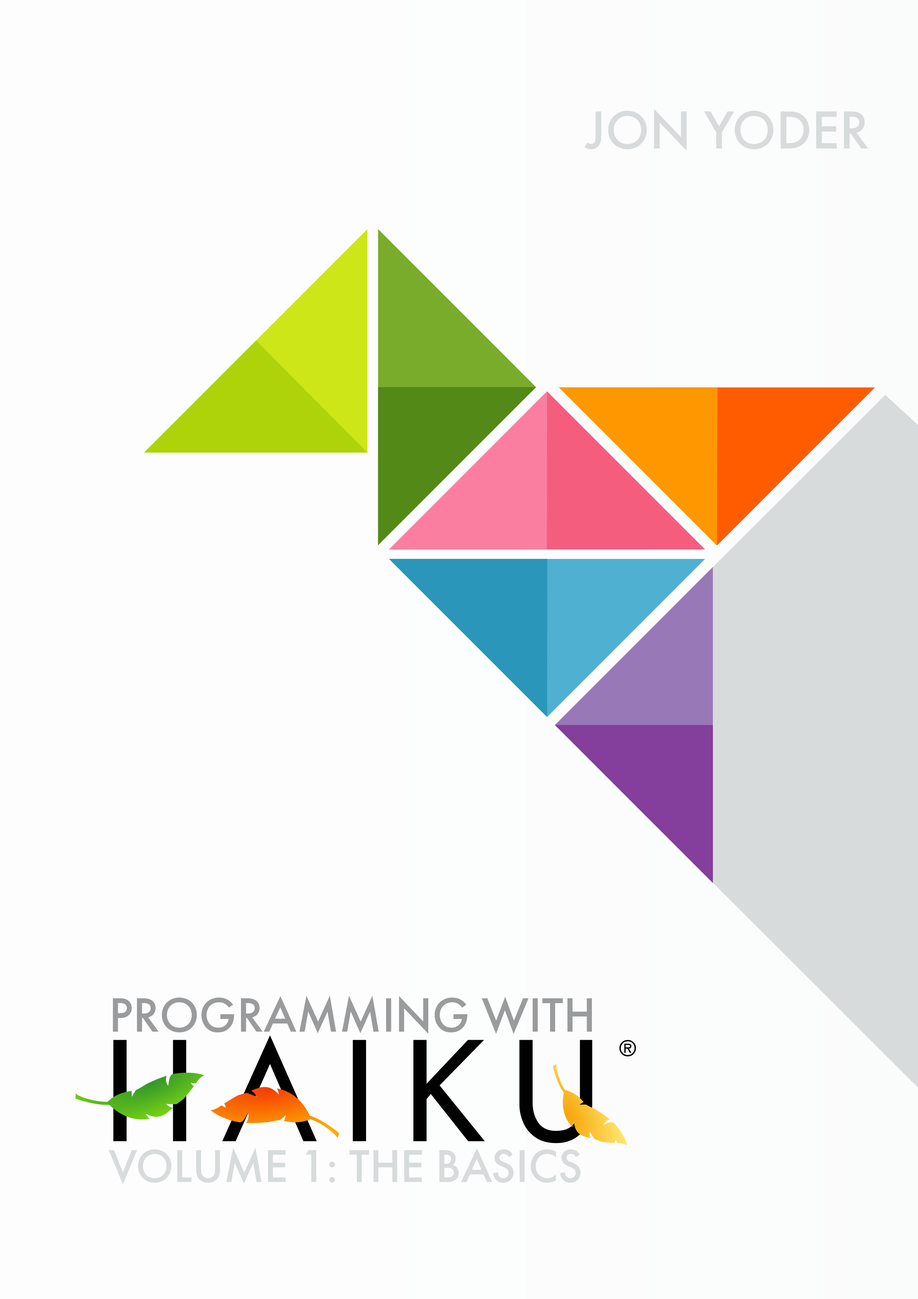
<style>
.page{position:relative;width:918px;height:1299px;background:#fdfdfe}
.page>*{position:absolute;margin:0}
.t1{font:55.5px "FuturaPT-Medium";color:#d8dbdc;text-transform:uppercase}
.t2{font:50.1px "FuturaPT-Medium";color:#999b9c;text-transform:uppercase}
.t3{font:47.8px "FuturaPT-Medium";color:#d8dbdc;text-transform:uppercase}
</style>
<div class="page">
<p class="t1" style="left:585px;top:109px;width:283px;height:42px">JON YODER</p>
<p class="t2" style="left:113px;top:996px;width:479px;height:38px">Programming with</p>
<p class="t3" style="left:108px;top:1147px;width:473px;height:37px">Volume 1: the basics</p>
</div>
